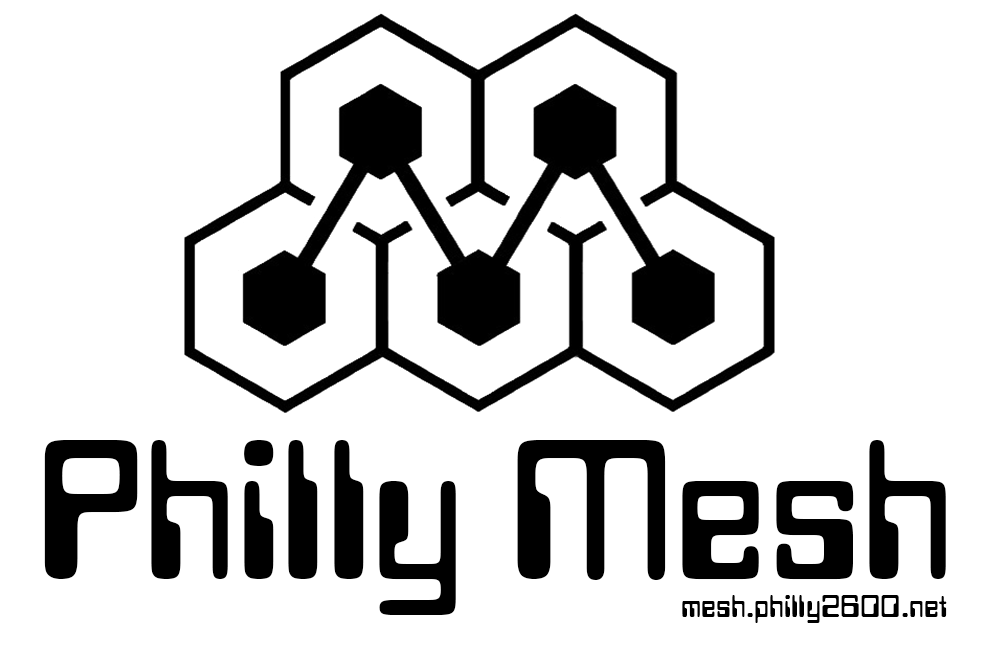
<style>
.page{position:relative;width:990px;height:651px;background:#ffffff}
.page>*{position:absolute;margin:0}
.t1{font:208.3px "DataSeventyPlain";color:#000000}
.t2{font:33.3px "DataSeventyPlain";color:#000000}
</style>
<div class="page">
<p class="t1" style="left:44px;top:440px;width:902px;height:175px">Philly Mesh</p>
<p class="t2" style="left:682px;top:595px;width:265px;height:28px">mesh.philly2600.net</p>
</div>
